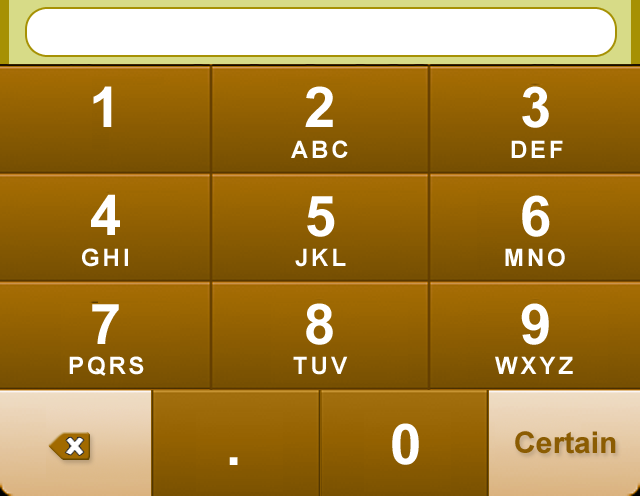
<style>
.page{position:relative;width:640px;height:496px}
.page>*{position:absolute;margin:0}
.t1{font:56px "Arial-BoldMT";color:#ffffff}
.t2{font:24px "Arial-BoldMT";letter-spacing:0.12em;color:#ffffff}
.t3{font:30px "Arial-BoldMT";color:#8b5c02}
</style>
<div class="page">
<p class="t1" style="left:93px;top:86px;width:19px;height:41px">1</p>
<p class="t1" style="left:305px;top:86px;width:28px;height:41px">2</p>
<p class="t1" style="left:522px;top:86px;width:27px;height:42px">3</p>
<p class="t2" style="left:291px;top:140px;width:57px;height:18px">ABC</p>
<p class="t2" style="left:511px;top:140px;width:52px;height:18px">DEF</p>
<p class="t1" style="left:91px;top:194px;width:29px;height:41px">4</p>
<p class="t1" style="left:307px;top:196px;width:28px;height:41px">5</p>
<p class="t1" style="left:522px;top:195px;width:28px;height:42px">6</p>
<p class="t2" style="left:82px;top:248px;width:46px;height:19px">GHI</p>
<p class="t2" style="left:295px;top:248px;width:51px;height:19px">JKL</p>
<p class="t2" style="left:505px;top:248px;width:60px;height:19px">MNO</p>
<p class="t1" style="left:92px;top:304px;width:27px;height:40px">7</p>
<p class="t1" style="left:306px;top:303px;width:27px;height:42px">8</p>
<p class="t1" style="left:521px;top:303px;width:28px;height:42px">9</p>
<p class="t2" style="left:69px;top:356px;width:75px;height:20px">PQRS</p>
<p class="t2" style="left:293px;top:356px;width:55px;height:19px">TUV</p>
<p class="t2" style="left:495px;top:356px;width:78px;height:18px">WXYZ</p>
<p class="t1" style="left:392px;top:423px;width:27px;height:42px">0</p>
<p class="t3" style="left:515px;top:431px;width:101px;height:23px">Certain</p>
<p class="t1" style="left:229px;top:457px;width:9px;height:8px">.</p>
</div>
